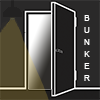
<style>
.page{position:relative;width:100px;height:100px;background:#2a2929}
.page>*{position:absolute;margin:0}
.t1{font:8px/12px "ArialMT";letter-spacing:-0.075em;color:#ffffff}
</style>
<div class="page">
<p class="t1" style="left:84px;top:15px;width:6px;height:66px;text-align:center">B<br>U<br>N<br>K<br>E<br>R</p>
</div>
